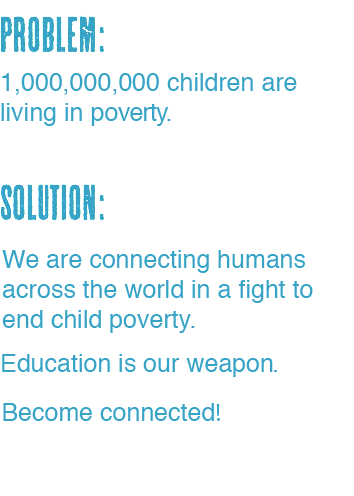
<style>
.page{position:relative;width:354px;height:496px;background:#ffffff}
.page>*{position:absolute;margin:0}
.t1{font:25px "Helvetica";color:#37a3c6}
.t2{font:25px "Helvetica";letter-spacing:-0.04em;color:#37a3c6}
.t3{font:25px "MyriadPro-Regular";color:#37a3c6}
</style>
<div class="page">
<p class="t1" style="left:1px;top:73px;width:296px;height:53px">1,000,000,000 children are <br>living in po<span class="t2">verty.</span></p>
<p class="t1" style="left:2px;top:250px;width:311px;height:83px">We are connecting humans <br>across the world in a fight to<br>end child poverty.</p>
<p class="t1" style="left:2px;top:354px;width:275px;height:23px">Education is our weapon.</p>
<p class="t1" style="left:3px;top:403px;width:217px;height:18px">Become connected<span class="t3">!</span></p>
</div>
